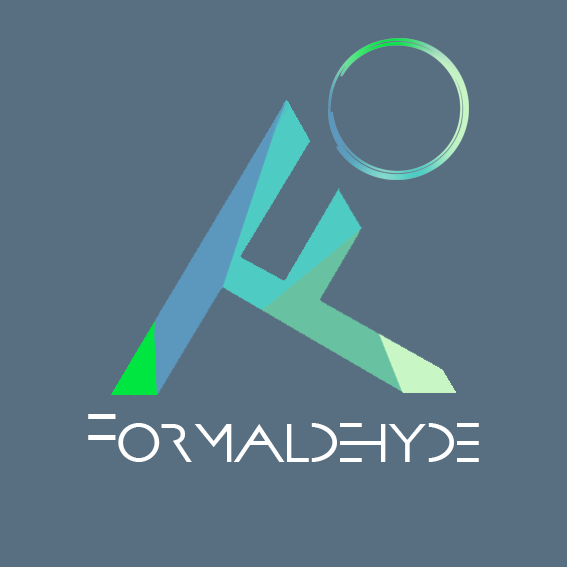
<style>
.page{position:relative;width:567px;height:567px;background:#586f81}
.page>*{position:absolute;margin:0}
.t1{font:47.7px "PROMETHEUS";color:#ffffff}
</style>
<div class="page">
<p class="t1" style="left:88px;top:414px;width:391px;height:48px">Formaldehyde</p>
</div>
